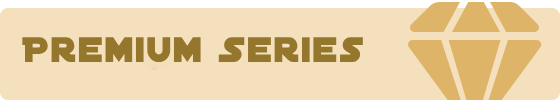
<style>
.page{position:relative;width:560px;height:100px;background:#f4e0bd}
.page>*{position:absolute;margin:0}
.t1{font:38px "DistantGalaxy";letter-spacing:0.05em;color:#94762c}
</style>
<div class="page">
<p class="t1" style="left:22px;top:37px;width:341px;height:25px">Premium Series</p>
</div>
